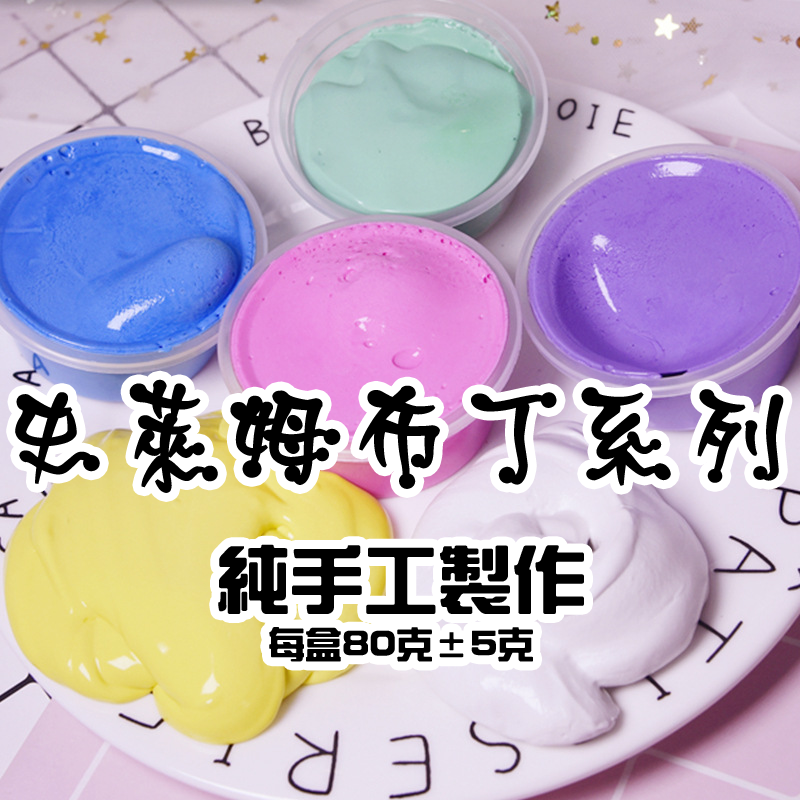
<style>
.page{position:relative;width:800px;height:800px}
.page>*{position:absolute;margin:0}
.t1{font:36px "HanWangZonYi";color:#000000;font-weight:bold}
.t2{font:120px "DFTou-W4-WINP-BF";letter-spacing:-0.08em;color:#000000;font-weight:bold}
.t3{font:72px "HanWangZonYi";color:#000000;font-weight:bold}
</style>
<div class="page">
<p class="t1" style="left:15px;top:379px;width:769px;height:283px;text-align:center"><span class="t2">史萊姆布丁系列<br></span><span class="t3">純手工製作<br></span>每盒80克±5克</p>
</div>
